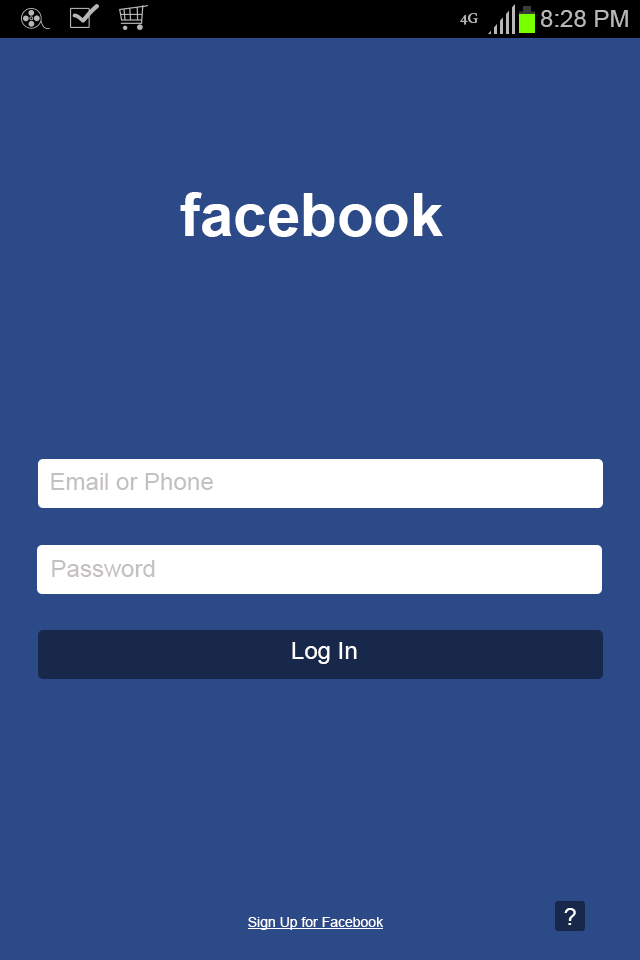
<style>
.page{position:relative;width:640px;height:960px;background:#2c4988}
.page>*{position:absolute;margin:0}
.t1{font:16px "AdobeGurmukhi-Bold";color:#b7b7b7}
.t2{font:24px "ArialMT";color:#b7b7b7}
.t3{font:60px "Arial-BoldMT";color:#ffffff}
.t4{font:24px "ArialMT";color:#c5c0c0}
.t5{font:24px "ArialMT";color:#ffffff}
.t6{font:14px "ArialMT";color:#ffffff}
</style>
<div class="page">
<p class="t1" style="left:460px;top:13px;width:18px;height:12px">4G</p>
<p class="t2" style="left:541px;top:10px;width:87px;height:17px">8:28 PM</p>
<p class="t3" style="left:180px;top:192px;width:263px;height:45px">facebook</p>
<p class="t4" style="left:51px;top:473px;width:162px;height:17px">Email or Phone</p>
<p class="t4" style="left:52px;top:560px;width:103px;height:17px">Password</p>
<p class="t5" style="left:292px;top:642px;width:65px;height:22px">Log In</p>
<p class="t6" style="left:248px;top:917px;width:136px;height:13px">Sign Up for Facebook</p>
<p class="t5" style="left:564px;top:908px;width:12px;height:17px">?</p>
</div>
